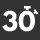
<style>
.page{position:relative;width:40px;height:40px;background:#333333}
.page>*{position:absolute;margin:0}
.t1{font:24.3px "LeagueSpartan-Bold";color:#ffffff}
</style>
<div class="page">
<p class="t1" style="left:2px;top:10px;width:33px;height:22px">30</p>
</div>
